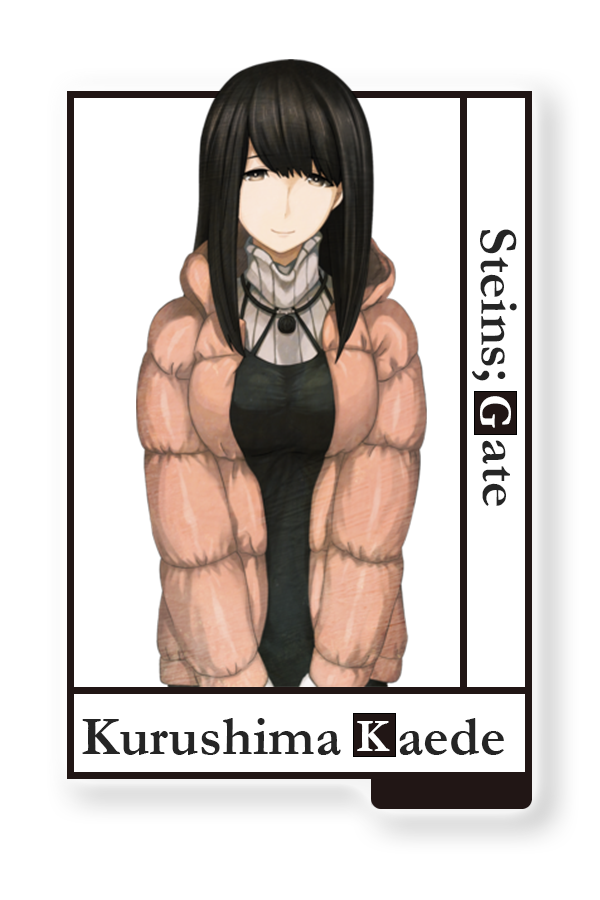
<style>
.page{position:relative;width:600px;height:900px;background:#ffffff}
.page>*{position:absolute;margin:0}
.t1{font:55.4px "Garamond-Bold";color:#252525}
.t2{font:47px "Garamond-Bold";color:#ffffff}
</style>
<div class="page">
<p class="t1" style="left:472px;top:229px;width:45px;height:277px;rotate:89deg">Steins;    ate</p>
<p class="t2" style="left:480px;top:396px;width:31px;height:32px;rotate:90deg">G</p>
<p class="t1" style="left:82px;top:718px;width:422px;height:37px">Kurushima    aede</p>
<p class="t2" style="left:357px;top:721px;width:33px;height:30px">K</p>
</div>
